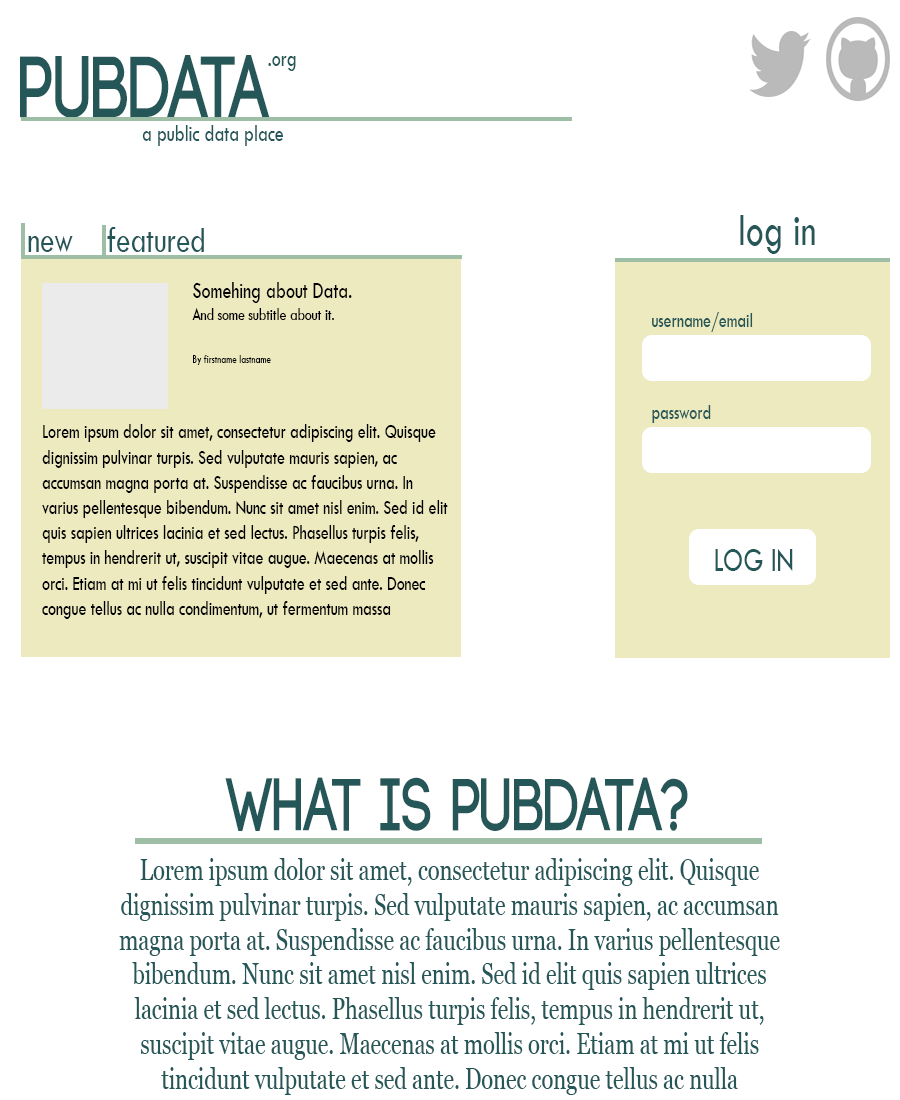
<style>
.page{position:relative;width:900px;height:1100px;background:#ffffff}
.page>*{position:absolute;margin:0}
.t1{font:86.5px "Code-Bold";color:#255758;scale:0.75 1}
.t2{font:24px "TwCenMT-Regular";color:#255758;scale:0.75 1}
.t3{font:47px "TwCenMT-Regular";color:#255758;scale:0.75 1}
.t4{font:38px "TwCenMT-Regular";color:#255758;scale:0.75 1}
.t5{font:18px "TwCenMT-Regular";color:#000000;scale:0.75 1}
.t6{font:24px "TwCenMT-Regular";color:#000000;scale:0.75 1}
.t7{font:12px "TwCenMT-Regular";color:#000000;scale:0.75 1}
.t8{font:21px "TwCenMT-Regular";color:#255758;scale:0.75 1}
.t9{font:21px "TwCenMT-Regular";color:#000000;scale:0.75 1}
.t10{font:35px "TwCenMT-Regular";color:#255758;scale:0.75 1}
.t11{font:73px "Code-Bold";color:#255758;scale:0.75 1}
</style>
<div class="page">
<p class="t1" style="left:20px;top:55px;width:250px;height:63px">pubdata</p>
<p class="t2" style="left:268px;top:56px;width:28px;height:15px">.org</p>
<p class="t2" style="left:142px;top:125px;width:142px;height:21px">a public data place</p>
<p class="t3" style="left:740px;top:215px;width:75px;height:39px">log in</p>
<p class="t4" style="left:107px;top:227px;width:97px;height:25px">featured</p>
<p class="t4" style="left:28px;top:236px;width:45px;height:16px">new</p>
<p class="t5" style="left:192px;top:282px;width:160px;height:83px"><span class="t6">Somehing about Data.<br></span>And some subtitle about it.<br><br><span class="t7">By firstname lastname</span></p>
<p class="t8" style="left:652px;top:312px;width:101px;height:20px">username/email</p>
<p class="t8" style="left:652px;top:405px;width:59px;height:18px">password</p>
<p class="t9" style="left:42px;top:424px;width:406px;height:195px">Lorem ipsum dolor sit amet, consectetur adipiscing elit. Quisque dignissim pulvinar turpis. Sed vulputate mauris sapien, ac accumsan magna porta at. Suspendisse ac faucibus urna. In varius pellentesque bibendum. Nunc sit amet nisl enim. Sed id elit quis sapien ultrices lacinia et sed lectus. Phasellus turpis felis, tempus in hendrerit ut, suscipit vitae augue. Maecenas at mollis orci. Etiam at mi ut felis tincidunt vulputate et sed ante. Donec congue tellus ac nulla condimentum, ut fermentum massa faucibus.</p>
<p class="t10" style="left:715px;top:549px;width:78px;height:22px">LOG IN</p>
<p class="t11" style="left:225px;top:777px;width:463px;height:54px">What is PUBdata?</p>
</div>
